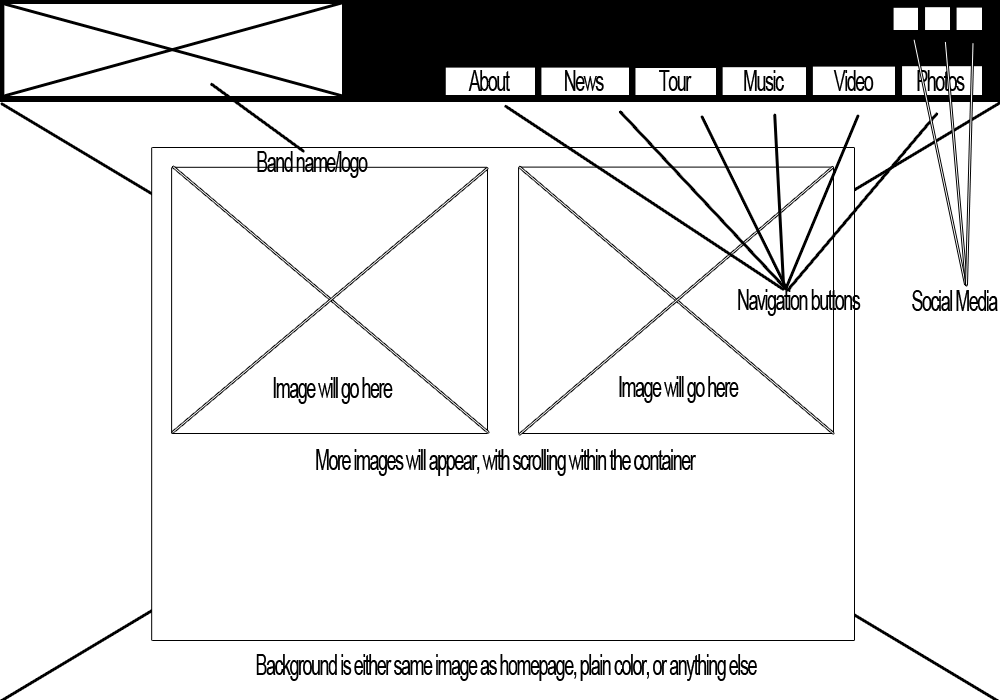
<style>
.page{position:relative;width:1000px;height:700px;background:#ffffff}
.page>*{position:absolute;margin:0}
.t1{font:28.9px "ArialMT";letter-spacing:-0.08em;color:#000000;scale:0.62 1}
</style>
<div class="page">
<p class="t1" style="left:468px;top:70px;width:42px;height:21px">About</p>
<p class="t1" style="left:565px;top:70px;width:39px;height:21px">News</p>
<p class="t1" style="left:659px;top:70px;width:33px;height:21px">Tour</p>
<p class="t1" style="left:744px;top:70px;width:40px;height:21px">Music</p>
<p class="t1" style="left:833px;top:70px;width:41px;height:21px">Video</p>
<p class="t1" style="left:917px;top:70px;width:48px;height:21px">Photos</p>
<p class="t1" style="left:257px;top:151px;width:111px;height:27px">Band name/logo</p>
<p class="t1" style="left:738px;top:289px;width:123px;height:27px">Navigation buttons</p>
<p class="t1" style="left:912px;top:290px;width:86px;height:21px">Social Media</p>
<p class="t1" style="left:273px;top:377px;width:120px;height:27px">Image will go here</p>
<p class="t1" style="left:619px;top:376px;width:120px;height:27px">Image will go here</p>
<p class="t1" style="left:316px;top:449px;width:380px;height:27px">More images will appear, with scrolling within the container</p>
<p class="t1" style="left:256px;top:654px;width:501px;height:27px">Background is either same image as homepage, plain color, or anything else</p>
</div>
